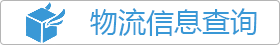
<style>
.page{position:relative;width:280px;height:45px;background:#ffffff}
.page>*{position:absolute;margin:0}
.t1{font:28px "MicrosoftYaHei";color:#3998d6}
</style>
<div class="page">
<p class="t1" style="left:90px;top:8px;width:167px;height:28px">物流信息查询</p>
</div>
